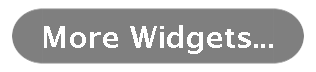
<style>
.page{position:relative;width:316px;height:72px;background:#7f7f7f}
.page>*{position:absolute;margin:0}
.t1{font:30px "LucidaGrande-Bold";color:#ffffff}
</style>
<div class="page">
<p class="t1" style="left:44px;top:25px;width:229px;height:29px">More Widgets...</p>
</div>
